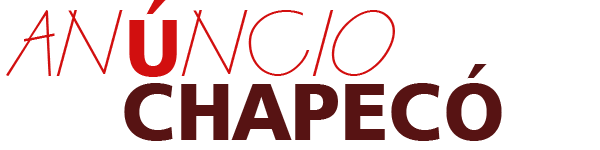
<style>
.page{position:relative;width:600px;height:150px;background:#ffffff}
.page>*{position:absolute;margin:0}
.t1{font:80px "CountryBlueprint";color:#d20f0f}
.t2{font:80px "Humanist777BT-BlackB";color:#d20f0f}
.t3{font:80px "Humanist777BT-BlackB";color:#571313}
</style>
<div class="page">
<p class="t1" style="left:6px;top:0px;width:389px;height:77px">AN<span class="t2">Ú</span>NCIO</p>
<p class="t3" style="left:124px;top:64px;width:378px;height:77px">CHAPECÓ</p>
</div>
